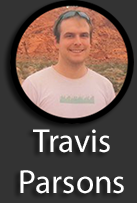
<style>
.page{position:relative;width:137px;height:203px;background:#333333}
.page>*{position:absolute;margin:0}
.t1{font:33.5px "MyriadPro-Regular";color:#ffffff}
</style>
<div class="page">
<p class="t1" style="left:20px;top:129px;width:104px;height:65px;text-align:center">Travis<br>Parsons</p>
</div>
